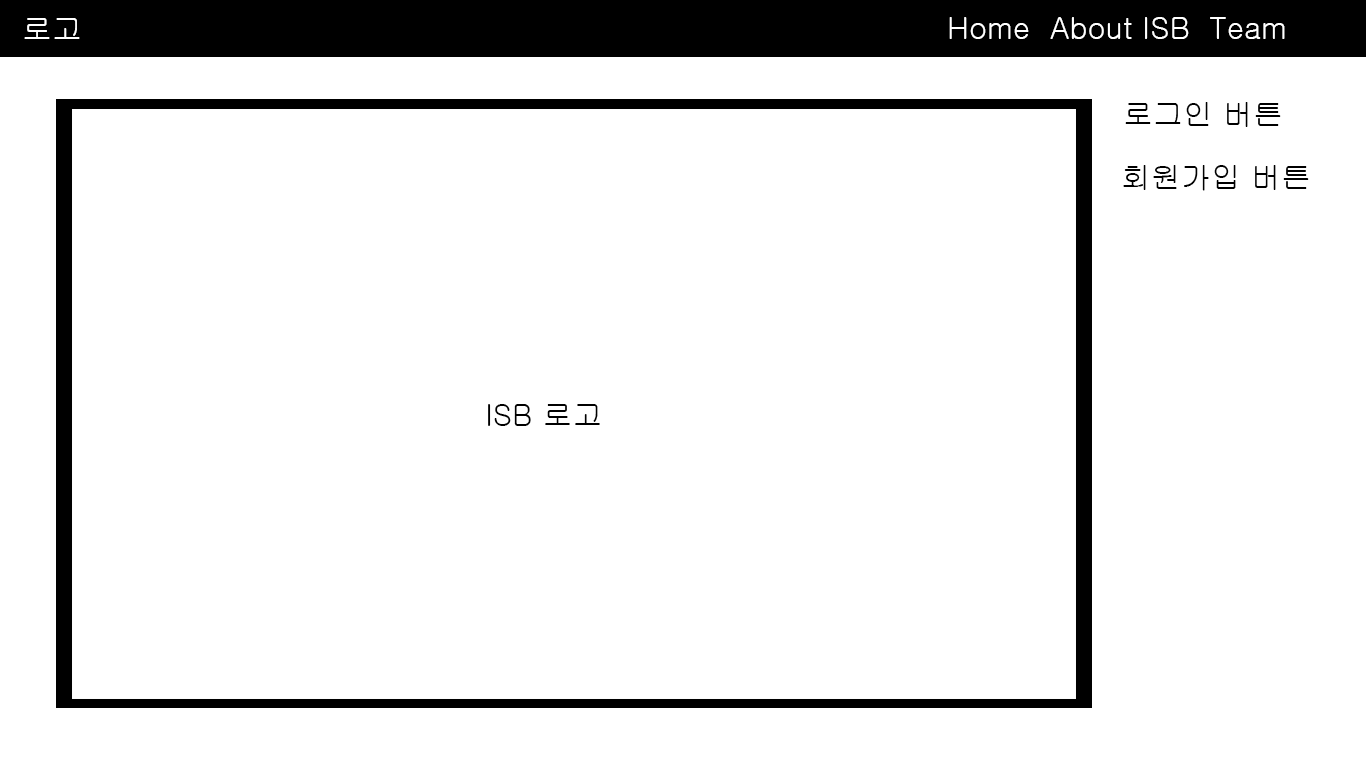
<style>
.page{position:relative;width:1366px;height:768px;background:#ffffff}
.page>*{position:absolute;margin:0}
.t1{font:30px "Gulim";color:#ffffff}
.t2{font:30px "Gulim";color:#000000}
</style>
<div class="page">
<p class="t1" style="left:949px;top:17px;width:336px;height:22px">Home  About ISB  Team</p>
<p class="t1" style="left:24px;top:18px;width:56px;height:21px">로고</p>
<p class="t2" style="left:1125px;top:102px;width:156px;height:25px">로그인 버튼</p>
<p class="t2" style="left:1123px;top:165px;width:186px;height:26px">회원가입 버튼</p>
<p class="t2" style="left:488px;top:404px;width:112px;height:22px">ISB 로고</p>
</div>
